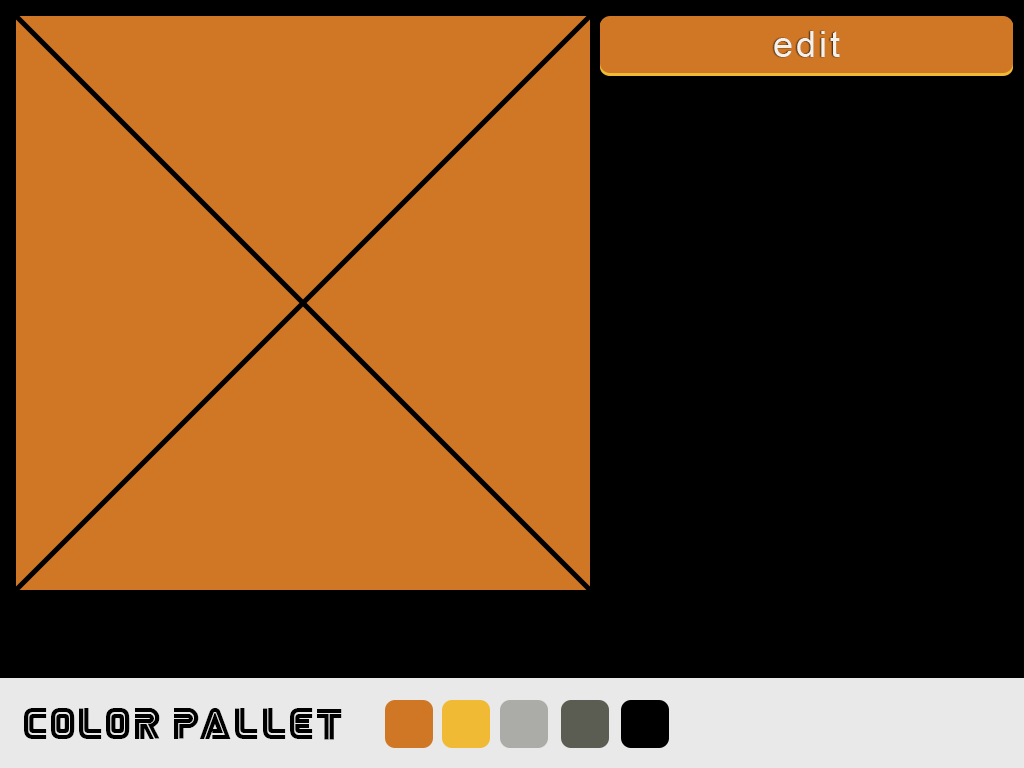
<style>
.page{position:relative;width:1024px;height:768px;background:#d07725}
.page>*{position:absolute;margin:0}
.t1{font:36px "ArialMT";letter-spacing:0.08em;color:#f4f0eb}
.t2{font:36px "MrRobot";letter-spacing:0.08em;color:#000000;text-transform:uppercase}
</style>
<div class="page">
<p class="t1" style="left:774px;top:31px;width:66px;height:26px">edit</p>
<p class="t2" style="left:24px;top:708px;width:318px;height:32px">color pallet</p>
</div>
